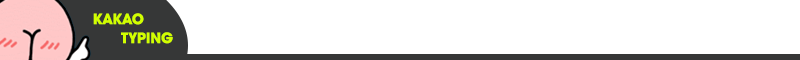
<style>
.page{position:relative;width:800px;height:60px;background:#ffffff}
.page>*{position:absolute;margin:0}
.t1{font:15.8px "AvantGardeMdITCTTBold";color:#d2ff00}
</style>
<div class="page">
<p class="t1" style="left:93px;top:13px;width:80px;height:31px">KAKAO<br> TYPING</p>
</div>
